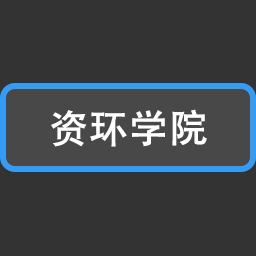
<style>
.page{position:relative;width:256px;height:256px;background:#333333}
.page>*{position:absolute;margin:0}
.t1{font:39px "AdobeHeitiStd-Regular";color:#ffffff;font-weight:bold}
</style>
<div class="page">
<p class="t1" style="left:51px;top:109px;width:156px;height:38px">资环学院</p>
</div>
